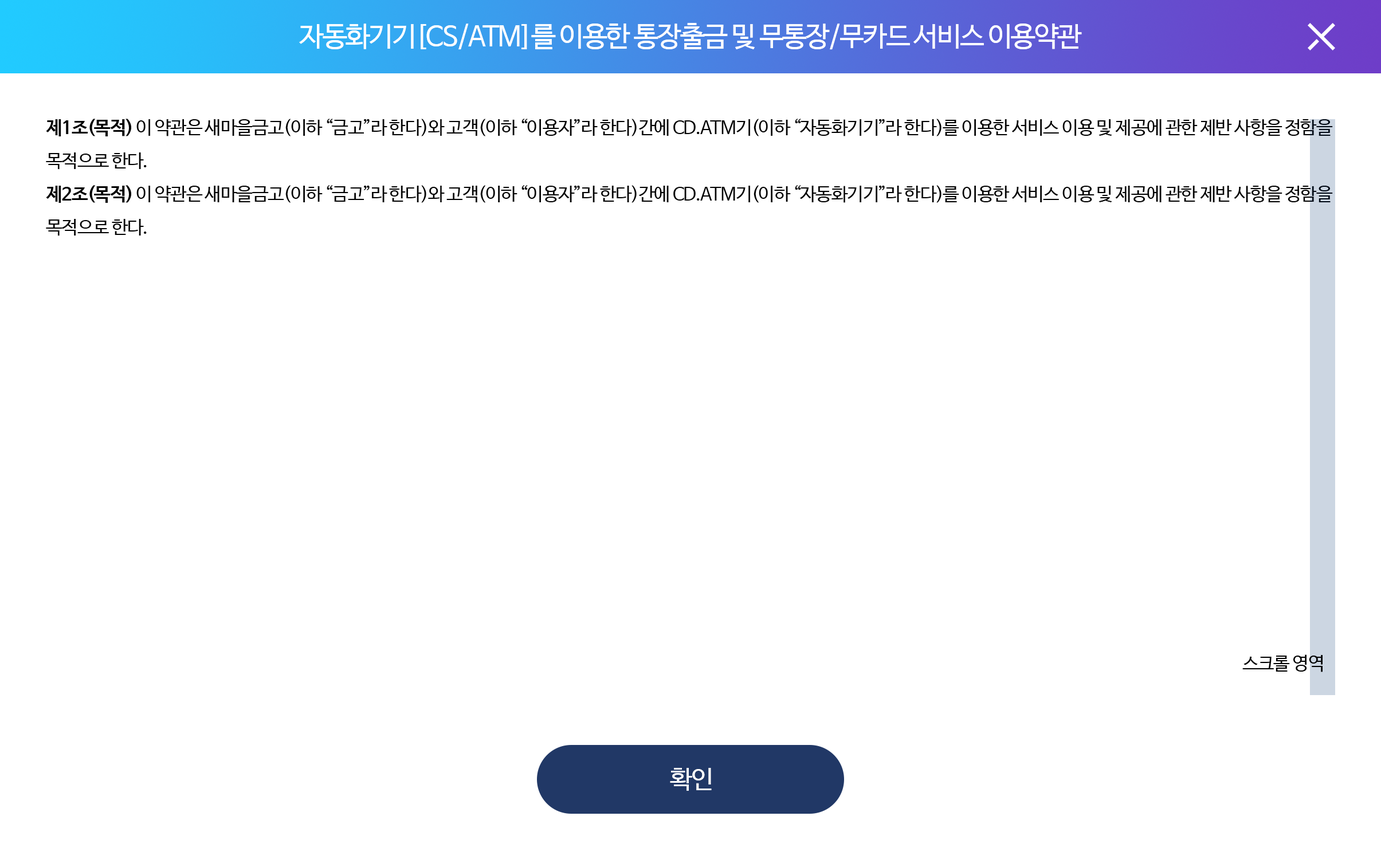
<style>
.page{position:relative;width:1381px;height:863px;background:#ffffff}
.page>*{position:absolute;margin:0}
.t1{font:27.5px "NanumBarunGothic";letter-spacing:-0.05em;color:#ffffff}
.t2{font:18.3px/33.2px "NanumBarunGothic";letter-spacing:-0.05em;color:#000000}
.t3{font:18.3px/33.2px "NanumBarunGothicBold";letter-spacing:-0.05em;color:#000000}
.t4{font:18.3px "NanumBarunGothic";letter-spacing:-0.05em;color:#000000}
.t5{font:25.2px "NanumBarunGothic";letter-spacing:-0.05em;color:#ffffff}
</style>
<div class="page">
<p class="t1" style="left:299px;top:23px;width:783px;height:27px">자동화기기[CS/ATM]를 이용한 통장출금 및 무통장/무카드 서비스 이용약관</p>
<p class="t2" style="left:46px;top:119px;width:1287px;height:117px"><span class="t3">제1조(목적)</span> 이 약관은 새마을금고(이하 “금고”라 한다)와 고객(이하 “이용자”라 한다)간에 CD.ATM기(이하 “자동화기기”라 한다)를 이용한 서비스 이용 및 제공에 관한 제반 사항을 정함을 <br>목적으로 한다.<br><span class="t3">제2조(목적)</span> 이 약관은 새마을금고(이하 “금고”라 한다)와 고객(이하 “이용자”라 한다)간에 CD.ATM기(이하 “자동화기기”라 한다)를 이용한 서비스 이용 및 제공에 관한 제반 사항을 정함을 <br>목적으로 한다.</p>
<p class="t4" style="left:1243px;top:655px;width:80px;height:17px">스크롤 영역</p>
<p class="t5" style="left:670px;top:768px;width:42px;height:23px">확인</p>
</div>
